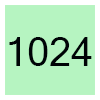
<style>
.page{position:relative;width:100px;height:100px;background:#b6f4c1}
.page>*{position:absolute;margin:0}
.t1{font:40px "MicrosoftSansSerif";color:#000407}
</style>
<div class="page">
<p class="t1" style="left:9px;top:37px;width:83px;height:29px">1024</p>
</div>
